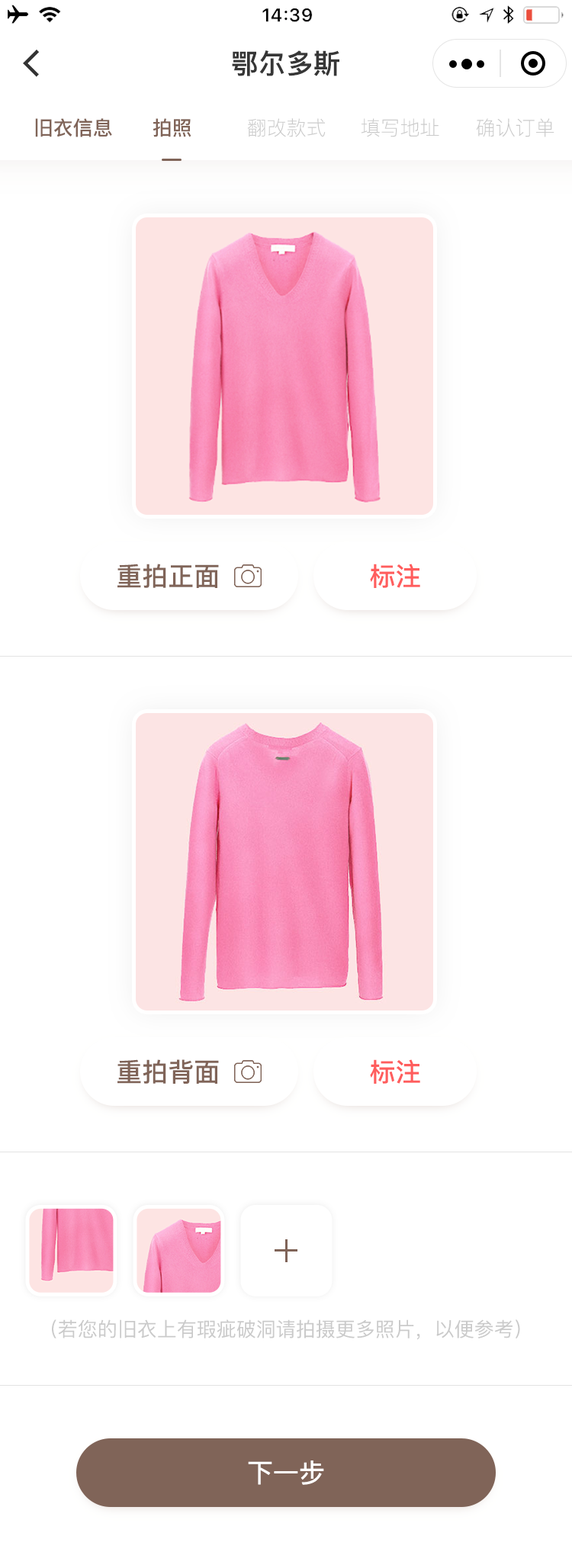
<style>
.page{position:relative;width:572px;height:1568px;background:#ffffff}
.page>*{position:absolute;margin:0}
.t1{font:27.5px "PingFang-SC-Heavy";color:#363636}
.t2{font:19.8px "PingFang-SC-Bold";color:#806458}
.t3{font:19.8px "PingFang-SC-Light";color:#cacaca}
.t4{font:25.9px "PingFang-SC-Bold";color:#806458}
.t5{font:25.9px "PingFang-SC-Bold";color:#ff5d5d}
.t6{font:19.8px "PingFang-SC-Medium";color:#cacaca}
.t7{font:25.9px "PingFang-SC-Bold";color:#ffffff}
</style>
<div class="page">
<p class="t1" style="left:232px;top:50px;width:107px;height:26px">鄂尔多斯</p>
<p class="t2" style="left:35px;top:118px;width:77px;height:19px">旧衣信息</p>
<p class="t2" style="left:153px;top:118px;width:38px;height:19px">拍照</p>
<p class="t3" style="left:247px;top:118px;width:79px;height:19px">翻改款式</p>
<p class="t3" style="left:361px;top:118px;width:78px;height:19px">填写地址</p>
<p class="t3" style="left:476px;top:118px;width:78px;height:19px">确认订单</p>
<p class="t4" style="left:117px;top:564px;width:102px;height:24px">重拍正面</p>
<p class="t5" style="left:370px;top:564px;width:50px;height:24px">标注</p>
<p class="t4" style="left:117px;top:1059px;width:102px;height:25px">重拍背面</p>
<p class="t5" style="left:370px;top:1059px;width:50px;height:25px">标注</p>
<p class="t6" style="left:52px;top:1319px;width:468px;height:21px">（若您的旧衣上有瑕疵破洞请拍摄更多照片，以便参考）</p>
<p class="t7" style="left:248px;top:1460px;width:76px;height:25px">下一步</p>
</div>
